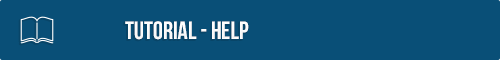
<style>
.page{position:relative;width:500px;height:60px;background:#094f77}
.page>*{position:absolute;margin:0}
.t1{font:25px "UTM-Bebas";color:#ffffff}
</style>
<div class="page">
<p class="t1" style="left:125px;top:21px;width:124px;height:19px">tutorial - help</p>
</div>
